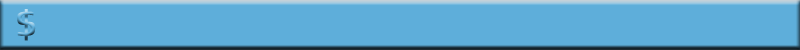
<style>
.page{position:relative;width:800px;height:50px;background:#5eaeda}
.page>*{position:absolute;margin:0}
.t1{font:36.4px "Play";font-weight:bold}
</style>
<div class="page">
<p class="t1" style="left:17px;top:9px;width:19px;height:32px">$</p>
</div>
